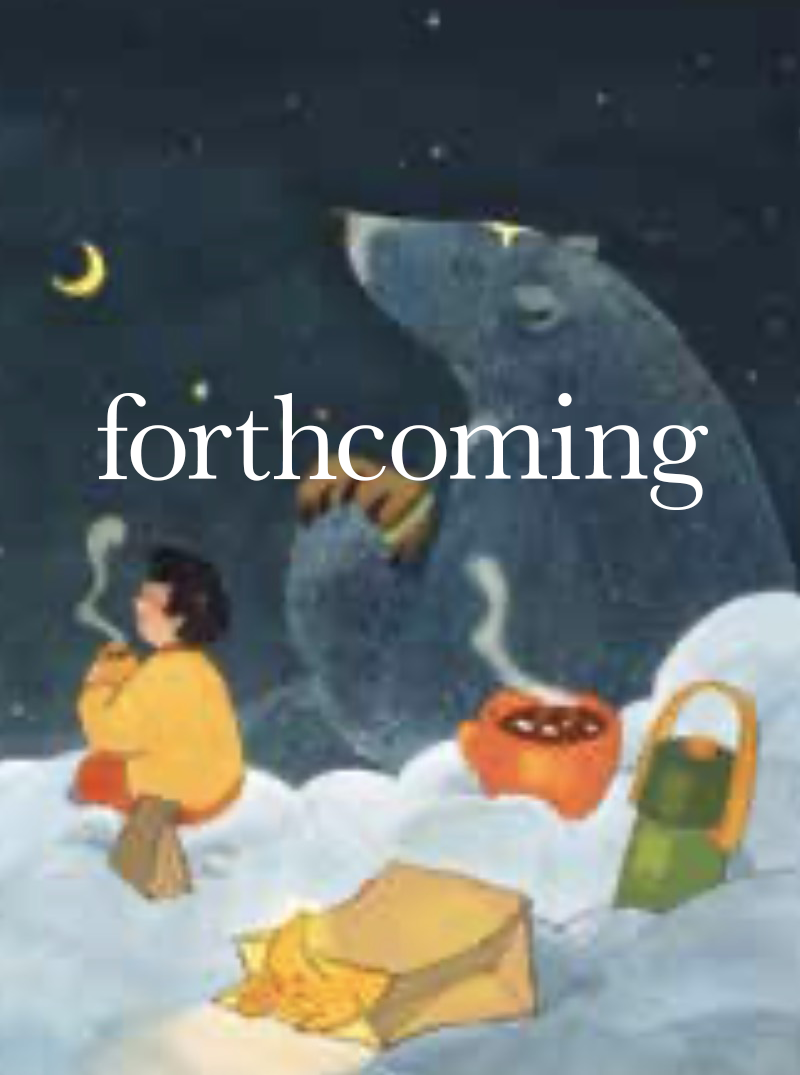
<style>
.page{position:relative;width:800px;height:1075px}
.page>*{position:absolute;margin:0}
.t1{font:128px "Baskerville";color:#ffffff}
</style>
<div class="page">
<p class="t1" style="left:97px;top:393px;width:611px;height:117px">forthcoming</p>
</div>
